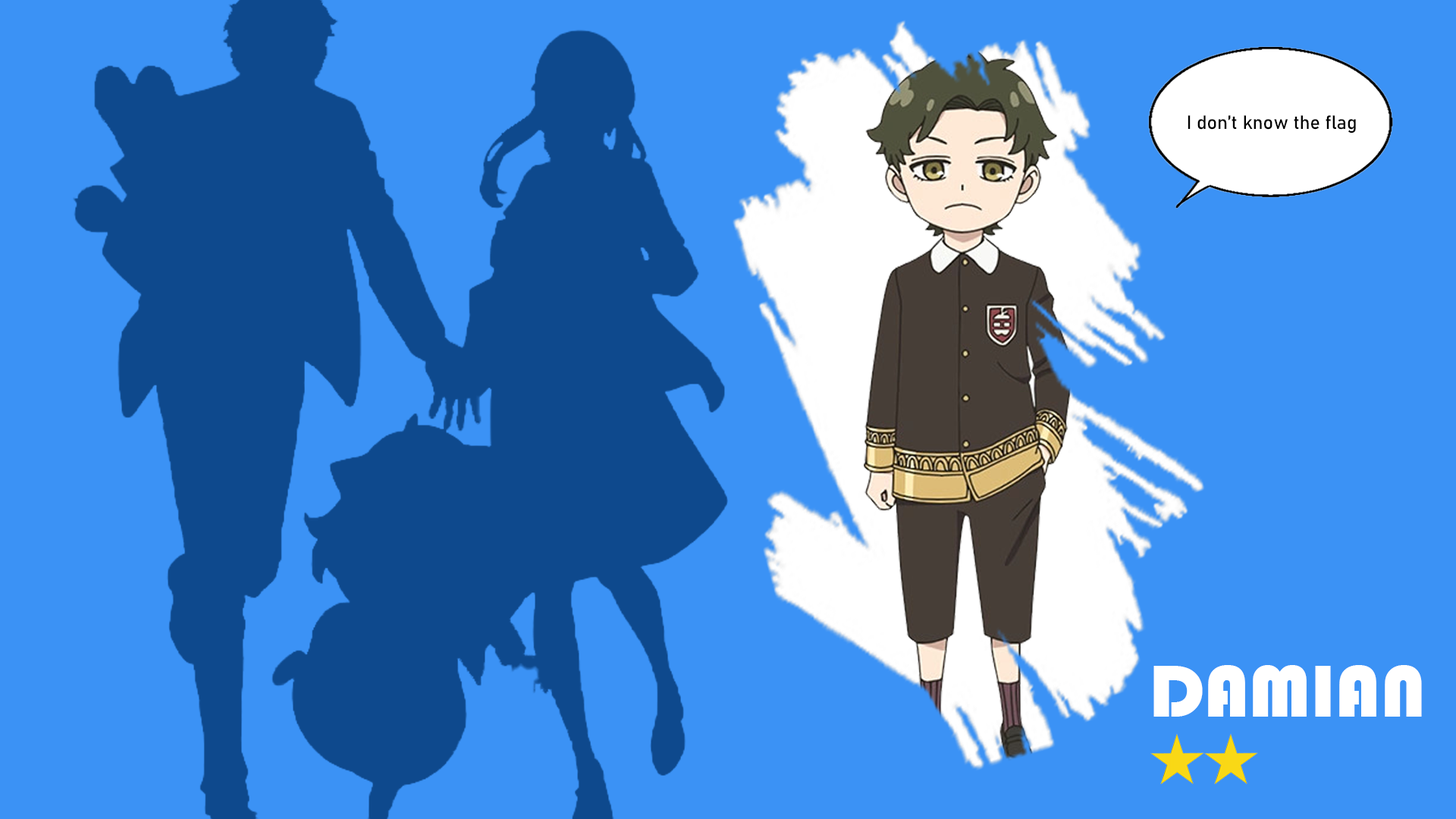
<style>
.page{position:relative;width:1456px;height:819px;background:#3b92f5}
.page>*{position:absolute;margin:0}
.t1{font:19px "Bahnschrift";color:#000000}
.t2{font:75.8px "Bauhaus93";color:#ffffff}
</style>
<div class="page">
<p class="t1" style="left:1188px;top:115px;width:168px;height:18px">I don’t know the flag</p>
<p class="t2" style="left:1153px;top:665px;width:269px;height:52px">DAMIAN</p>
</div>
